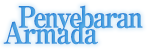
<style>
.page{position:relative;width:147px;height:55px;background:#ffffff}
.page>*{position:absolute;margin:0}
.t1{font:29px/16px "RyuminPro-ExBold";letter-spacing:-0.12em;color:#54aae4;font-weight:bold;scale:0.9 1}
.t2{font:29px/16px "RyuminPro-ExBold";letter-spacing:-0.08em;color:#54aae4;font-weight:bold;scale:0.9 1}
</style>
<div class="page">
<p class="t1" style="left:3px;top:5px;width:140px;height:40px;text-align:center">Penyebaran  <br><span class="t2">Armada</span></p>
</div>
